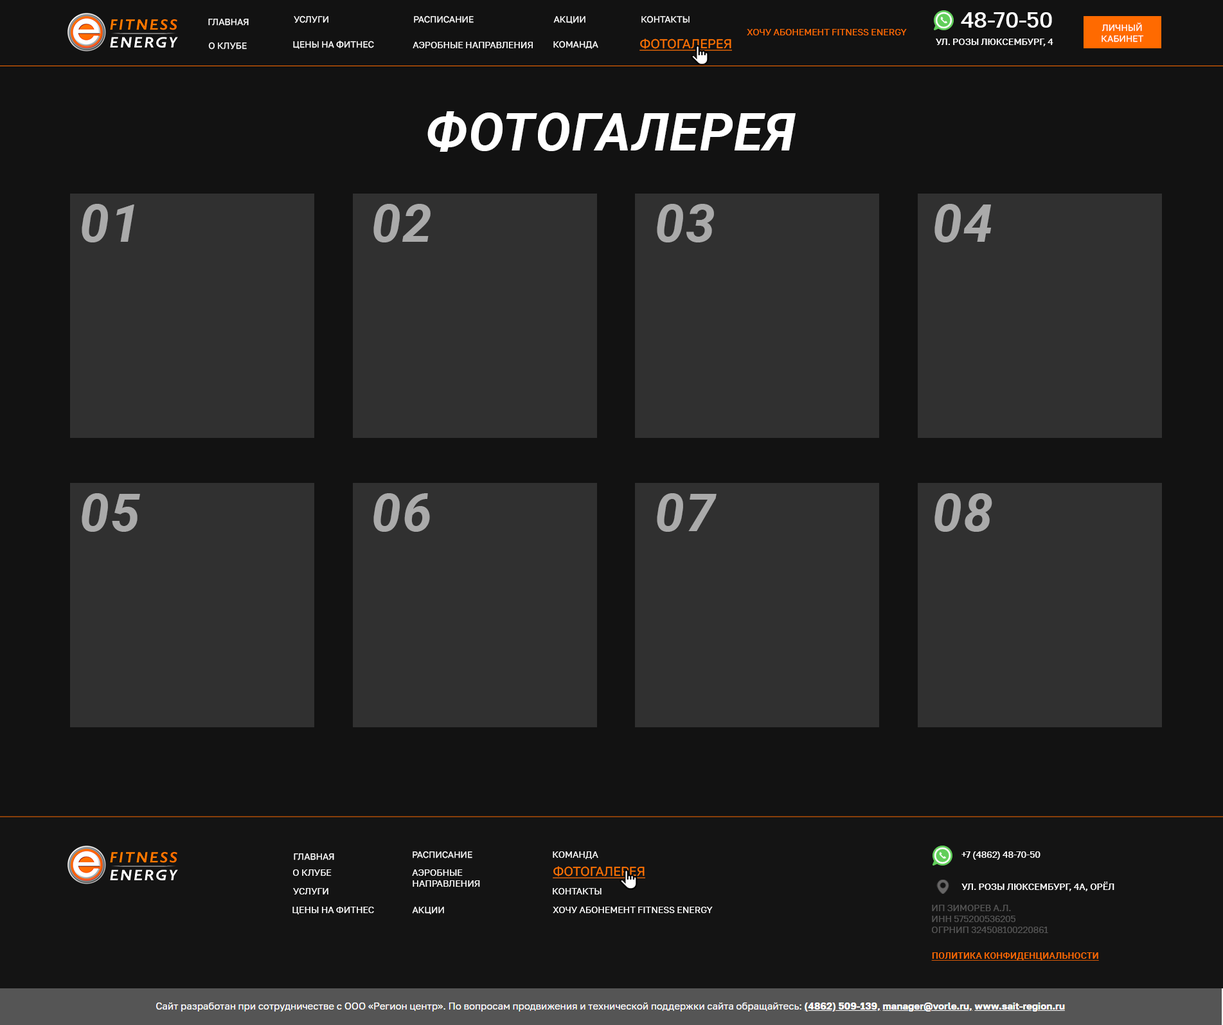
<style>
.page{position:relative;width:1223px;height:1025px;background:#121212}
.page>*{position:absolute;margin:0}
.t1{font:9px "GolosText-Regular";letter-spacing:-0.015em;color:#ffffff;text-transform:uppercase}
.t2{font:21.9px "GolosText-Medium";letter-spacing:-0.015em;color:#ffffff}
.t3{font:9px "GolosText-Regular";letter-spacing:-0.015em;color:#ff6a00;text-transform:uppercase}
.t4{font:12.9px "GolosText-Regular";letter-spacing:-0.015em;color:#fd7200;text-transform:uppercase;text-decoration:underline}
.t5{font:9px "GolosText-Medium";letter-spacing:-0.015em;color:#ffffff;text-transform:uppercase}
.t6{font:52.7px "Roboto-BoldItalic";letter-spacing:-0.015em;color:#ffffff;text-transform:uppercase}
.t7{font:52.7px "Roboto-BoldItalic";letter-spacing:-0.015em;color:#aaaaaa;text-transform:uppercase}
.t8{font:9px "GolosText-Medium";letter-spacing:-0.015em;color:#ffffff}
.t9{font:9px "GolosText-Regular";letter-spacing:-0.015em;color:#555555;text-transform:uppercase}
.t10{font:9px "Roboto-Medium";letter-spacing:-0.015em;color:#ff6a00;text-transform:uppercase;text-decoration:underline}
</style>
<div class="page">
<p class="t1" style="left:294px;top:15px;width:34px;height:8px">Услуги</p>
<p class="t1" style="left:414px;top:15px;width:60px;height:8px">Расписание</p>
<p class="t1" style="left:554px;top:16px;width:32px;height:8px">Акции</p>
<p class="t1" style="left:642px;top:15px;width:48px;height:8px">Контакты</p>
<p class="t2" style="left:961px;top:12px;width:91px;height:16px">48-70-50</p>
<p class="t1" style="left:208px;top:19px;width:41px;height:7px">Главная</p>
<p class="t3" style="left:747px;top:29px;width:160px;height:6px">Хочу абонемент Fitness Energy</p>
<p class="t1" style="left:1102px;top:22px;width:42px;height:20px;text-align:center">Личный<br>кабинет</p>
<p class="t1" style="left:208px;top:42px;width:39px;height:8px">О клубе</p>
<p class="t1" style="left:293px;top:40px;width:81px;height:9px">Цены на фитнес</p>
<p class="t1" style="left:413px;top:42px;width:120px;height:6px">аэробные направления</p>
<p class="t1" style="left:554px;top:40px;width:44px;height:9px">Команда</p>
<p class="t4" style="left:640px;top:39px;width:92px;height:12px">Фотогалерея</p>
<p class="t5" style="left:936px;top:39px;width:118px;height:7px">ул. Розы Люксембург, 4</p>
<p class="t6" style="left:428px;top:111px;width:368px;height:41px">Фотогалерея</p>
<p class="t7" style="left:82px;top:204px;width:52px;height:38px">01</p>
<p class="t7" style="left:374px;top:204px;width:57px;height:38px">02</p>
<p class="t7" style="left:657px;top:204px;width:57px;height:38px">03</p>
<p class="t7" style="left:935px;top:204px;width:57px;height:38px">04</p>
<p class="t7" style="left:82px;top:493px;width:58px;height:39px">05</p>
<p class="t7" style="left:374px;top:493px;width:56px;height:39px">06</p>
<p class="t7" style="left:657px;top:493px;width:60px;height:39px">07</p>
<p class="t7" style="left:935px;top:493px;width:58px;height:39px">08</p>
<p class="t1" style="left:294px;top:853px;width:40px;height:7px">Главная</p>
<p class="t1" style="left:413px;top:851px;width:60px;height:7px">Расписание</p>
<p class="t1" style="left:553px;top:851px;width:45px;height:8px">Команда</p>
<p class="t8" style="left:962px;top:851px;width:79px;height:9px">+7 (4862) 48-70-50</p>
<p class="t1" style="left:293px;top:869px;width:39px;height:7px">О клубе</p>
<p class="t1" style="left:412px;top:869px;width:68px;height:18px">аэробные <br>направления</p>
<p class="t4" style="left:553px;top:866px;width:92px;height:12px">Фотогалерея</p>
<p class="t5" style="left:962px;top:881px;width:153px;height:10px">ул. Розы Люксембург, 4А, Орёл</p>
<p class="t1" style="left:293px;top:888px;width:35px;height:6px">Услуги</p>
<p class="t1" style="left:553px;top:888px;width:49px;height:6px">Контакты</p>
<p class="t9" style="left:932px;top:905px;width:116px;height:28px">ИП Зиморев А.Л.<br>ИНН 575200536205<br>ОГРНИП 324508100220861</p>
<p class="t1" style="left:292px;top:906px;width:82px;height:8px">Цены на фитнес</p>
<p class="t1" style="left:412px;top:906px;width:32px;height:8px">Акции</p>
<p class="t1" style="left:553px;top:906px;width:160px;height:7px">Хочу абонемент Fitness Energy</p>
<p class="t10" style="left:932px;top:952px;width:167px;height:8px">Политика конфиденциальности</p>
</div>
